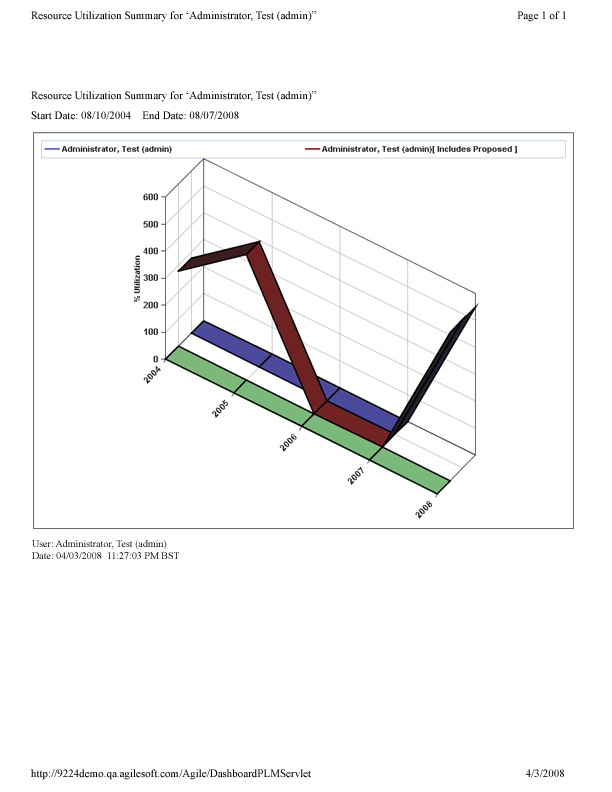
<style>
.page{position:relative;width:612px;height:792px;background:#ffffff}
.page>*{position:absolute;margin:0}
.t1{font:11px "TimesNewRomanPSMT";color:#000000}
.t2{font:11px/20px "TimesNewRomanPSMT";color:#000000}
.t3{font:10px/12px "TimesNewRomanPSMT";color:#000000}
</style>
<div class="page">
<p class="t1" style="left:31px;top:11px;width:535px;height:11px">Resource Utilization Summary for ‘Administrator, Test (admin)”                                                                         Page 1 of 1</p>
<p class="t2" style="left:31px;top:91px;width:286px;height:29px">Resource Utilization Summary for ‘Administrator, Test (admin)”<br>Start Date: 08/10/2004    End Date: 08/07/2008</p>
<p class="t3" style="left:32px;top:540px;width:147px;height:19px">User: Administrator, Test (admin)<br>Date: 04/03/2008  11:27:03 PM BST</p>
<p class="t1" style="left:31px;top:769px;width:533px;height:11px">http://9224demo.qa.agilesoft.com/Agile/DashboardPLMServlet                                                                              4/3/2008</p>
</div>
